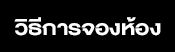
<style>
.page{position:relative;width:175px;height:52px;background:#000000}
.page>*{position:absolute;margin:0}
.t1{font:30.4px "DBHelvethaicaX-BdExt";color:#ffffff}
</style>
<div class="page">
<p class="t1" style="left:14px;top:17px;width:147px;height:19px">วิธีการจองห้อง</p>
</div>
